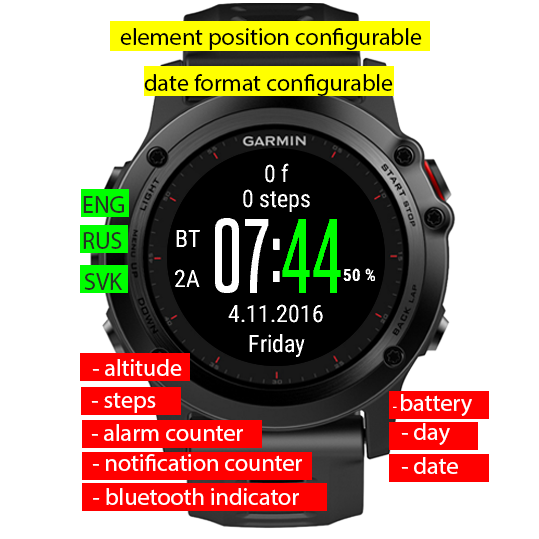
<style>
.page{position:relative;width:539px;height:539px;background:#ffffff}
.page>*{position:absolute;margin:0}
.t1{font:24px "MyriadPro-Regular";color:#000000}
.t2{font:24px "MyriadPro-Regular";color:#263025}
.t3{font:24px "MyriadPro-Regular";color:#ffffff}
.t4{font:13.3px "MyriadPro-Regular";color:#ffffff}
</style>
<div class="page">
<p class="t1" style="left:120px;top:28px;width:302px;height:22px">element position configurable</p>
<p class="t1" style="left:144px;top:74px;width:249px;height:22px">date format configurable</p>
<p class="t2" style="left:83px;top:196px;width:41px;height:17px">ENG</p>
<p class="t2" style="left:83px;top:232px;width:39px;height:17px">RUS</p>
<p class="t2" style="left:84px;top:273px;width:39px;height:17px">SVK</p>
<p class="t3" style="left:92px;top:359px;width:90px;height:17px">- altitude</p>
<p class="t3" style="left:91px;top:392px;width:65px;height:21px">- steps</p>
<p class="t3" style="left:393px;top:394px;width:79px;height:22px"><span class="t4">- </span>battery</p>
<p class="t3" style="left:91px;top:424px;width:152px;height:17px">- alarm counter</p>
<p class="t3" style="left:401px;top:423px;width:49px;height:22px">- day</p>
<p class="t3" style="left:92px;top:454px;width:210px;height:17px">- notification counter</p>
<p class="t3" style="left:401px;top:457px;width:57px;height:17px">- date</p>
<p class="t3" style="left:93px;top:488px;width:206px;height:17px">- bluetooth indicator</p>
</div>
